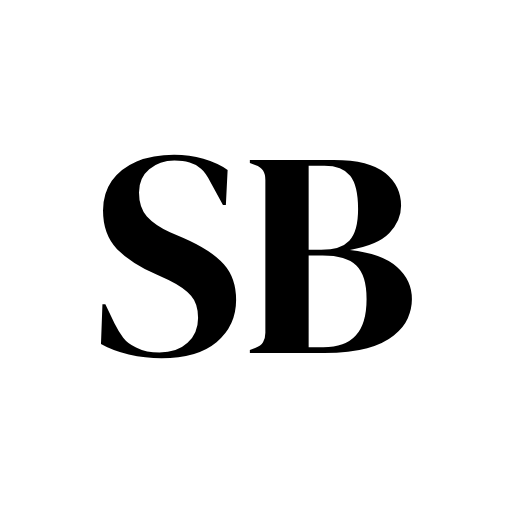
<style>
.page{position:relative;width:512px;height:512px;background:#ffffff}
.page>*{position:absolute;margin:0}
.t1{font:292.5px "DMSerifDisplay-Regular";color:#000000}
</style>
<div class="page">
<p class="t1" style="left:101px;top:154px;width:311px;height:205px">SB</p>
</div>
